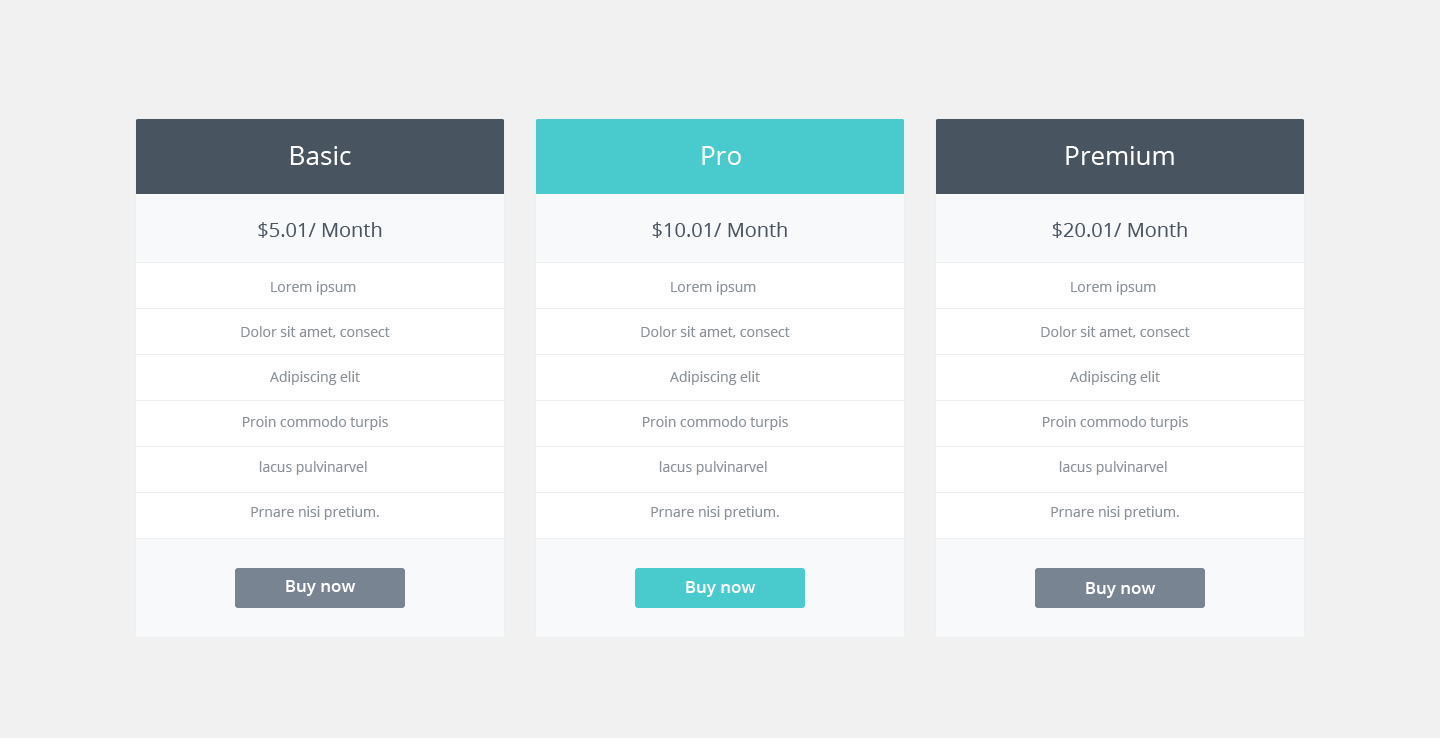
<style>
.page{position:relative;width:1440px;height:738px;background:#f1f1f1}
.page>*{position:absolute;margin:0}
.t1{font:26px "OpenSans";color:#ffffff}
.t2{font:20px "OpenSans";color:#485460}
.t3{font:14px/45px "OpenSans";color:#8c9299}
.t4{font:17px "OpenSans-Semibold";color:#ffffff}
</style>
<div class="page">
<p class="t1" style="left:290px;top:146px;width:61px;height:19px">Basic</p>
<p class="t1" style="left:702px;top:146px;width:39px;height:19px">Pro</p>
<p class="t1" style="left:1066px;top:146px;width:108px;height:19px">Premium</p>
<p class="t2" style="left:258px;top:222px;width:124px;height:16px">$5.01/ Month</p>
<p class="t2" style="left:652px;top:222px;width:135px;height:16px">$10.01/ Month</p>
<p class="t2" style="left:1052px;top:222px;width:135px;height:16px">$20.01/ Month</p>
<p class="t3" style="left:241px;top:281px;width:149px;height:239px;text-align:center">Lorem ipsum <br>Dolor sit amet, consect<br>Adipiscing elit<br>Proin commodo turpis<br>lacus pulvinarvel <br>Prnare nisi pretium.</p>
<p class="t3" style="left:641px;top:281px;width:149px;height:239px;text-align:center">Lorem ipsum <br>Dolor sit amet, consect<br>Adipiscing elit<br>Proin commodo turpis<br>lacus pulvinarvel <br>Prnare nisi pretium.</p>
<p class="t3" style="left:1041px;top:281px;width:149px;height:239px;text-align:center">Lorem ipsum <br>Dolor sit amet, consect<br>Adipiscing elit<br>Proin commodo turpis<br>lacus pulvinarvel <br>Prnare nisi pretium.</p>
<p class="t4" style="left:286px;top:580px;width:70px;height:16px">Buy now</p>
<p class="t4" style="left:686px;top:581px;width:70px;height:16px">Buy now</p>
<p class="t4" style="left:1086px;top:582px;width:70px;height:16px">Buy now</p>
</div>
